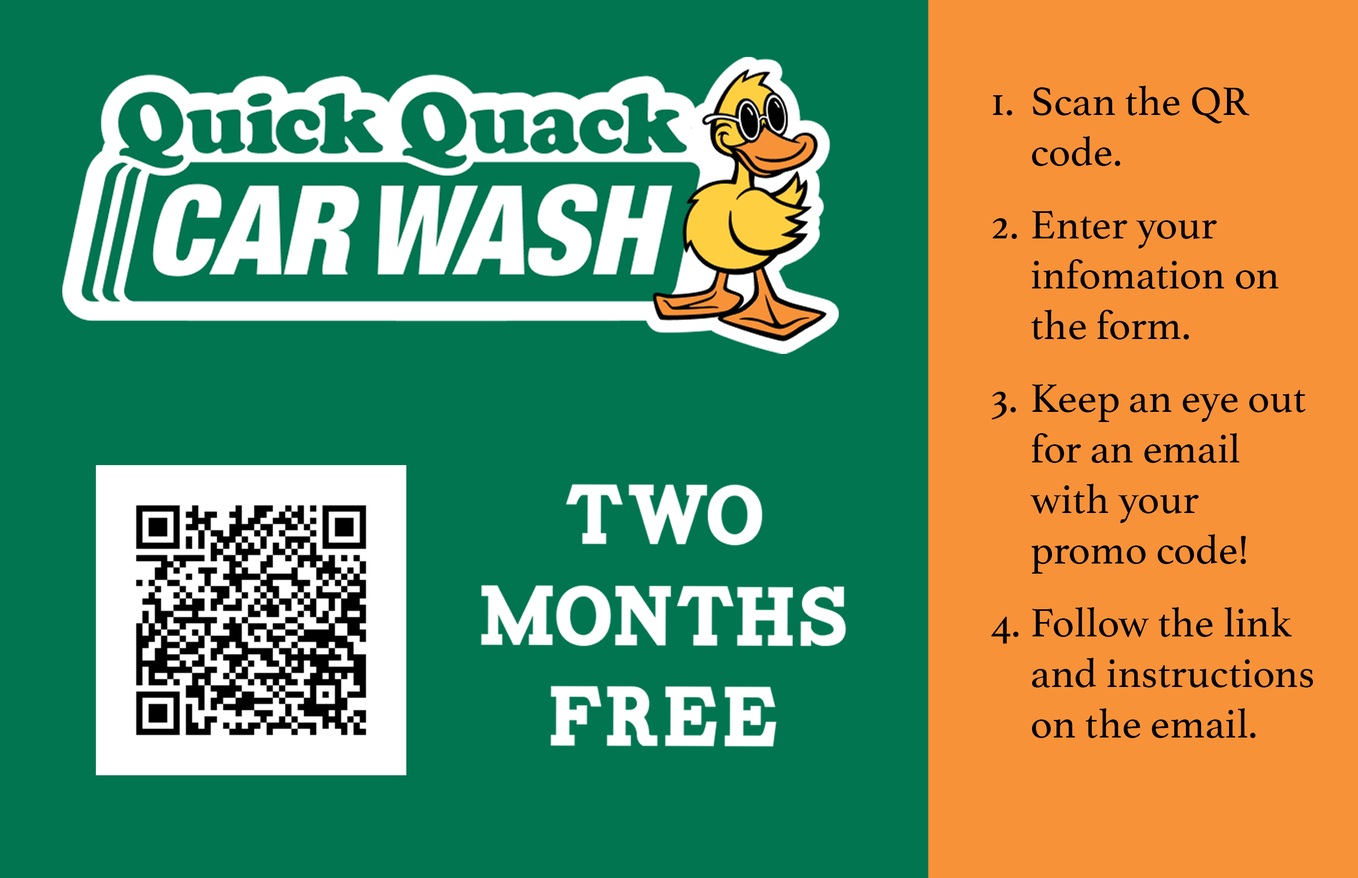
<style>
.page{position:relative;width:1358px;height:878px;background:#007550}
.page>*{position:absolute;margin:0}
.t1{font:42.1px "Athelas-Regular";color:#000000}
.t2{font:84.3px "Carton";color:#ffffff}
</style>
<div class="page">
<p class="t1" style="left:991px;top:86px;width:322px;height:652px">Scan the QR code.<br> <br>Enter your infomation on the form.<br> <br>Keep an eye out for an email with your promo code!<br>  <br>Follow the link and instructions on the email.</p>
<p class="t2" style="left:481px;top:483px;width:365px;height:264px;text-align:center">Two months free</p>
</div>
